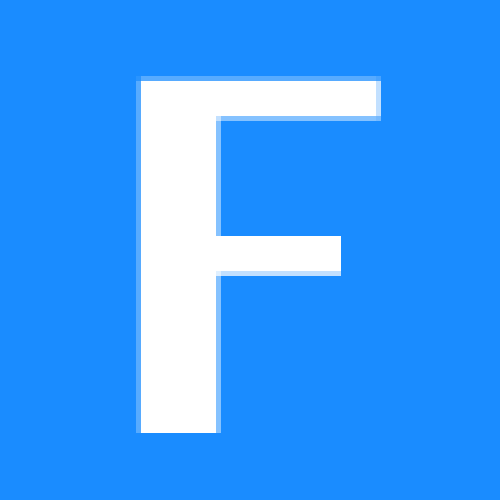
<style>
.page{position:relative;width:500px;height:500px;background:#1a8cff}
.page>*{position:absolute;margin:0}
.t1{font:500px "Fixedsys";color:#ffffff}
</style>
<div class="page">
<p class="t1" style="left:136px;top:76px;width:245px;height:357px">F</p>
</div>
